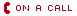
<style>
.page{position:relative;width:77px;height:16px;background:#ffffff}
.page>*{position:absolute;margin:0}
.t1{font:10px "Silkscreen";color:#b9001c}
</style>
<div class="page">
<p class="t1" style="left:16px;top:5px;width:56px;height:6px">ON A CALL</p>
</div>
